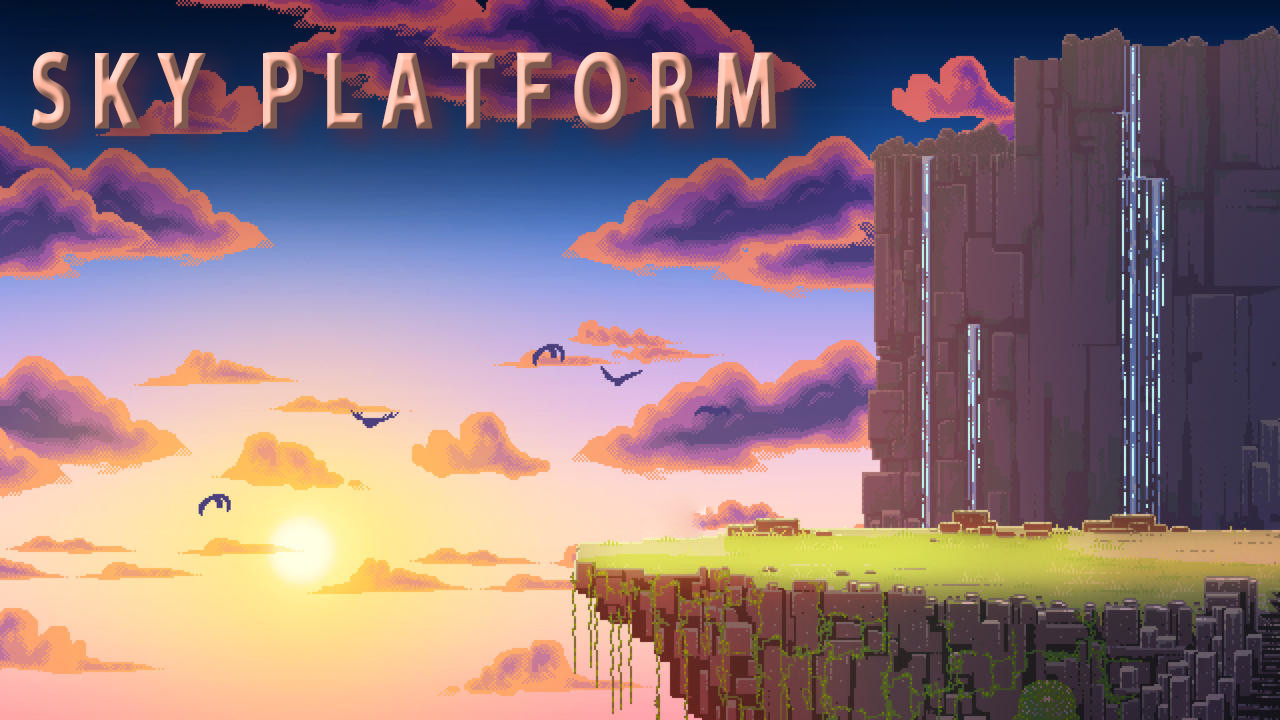
<style>
.page{position:relative;width:1280px;height:720px}
.page>*{position:absolute;margin:0}
.t1{font:109.3px "MyriadPro-Bold";letter-spacing:0.22em;font-weight:bold;scale:0.71 1}
</style>
<div class="page">
<p class="t1" style="left:32px;top:51px;width:744px;height:79px">SKY PLATFORM</p>
</div>
